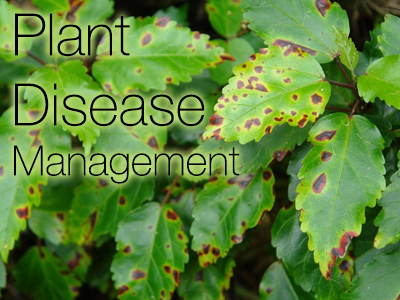
<style>
.page{position:relative;width:400px;height:300px}
.page>*{position:absolute;margin:0}
.t1{font:58.3px "HelveticaNeue-Thin";color:#000000}
.t2{font:41.7px "HelveticaNeue-Thin";color:#000000}
</style>
<div class="page">
<p class="t1" style="left:14px;top:13px;width:226px;height:171px">Plant<br>Disease<br><span class="t2">Management</span></p>
</div>
